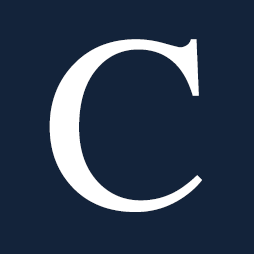
<style>
.page{position:relative;width:254px;height:254px;background:#13233a}
.page>*{position:absolute;margin:0}
.t1{font:250px "Times-Roman";color:#ffffff}
</style>
<div class="page">
<p class="t1" style="left:49px;top:39px;width:153px;height:173px">C</p>
</div>
